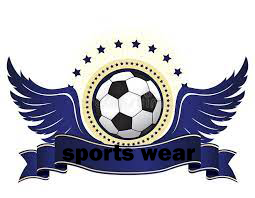
<style>
.page{position:relative;width:255px;height:198px;background:#ffffff}
.page>*{position:absolute;margin:0}
.t1{font:24px "FranklinGothic-Heavy";color:#000000}
</style>
<div class="page">
<p class="t1" style="left:62px;top:144px;width:133px;height:21px">sports wear</p>
</div>
